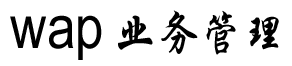
<style>
.page{position:relative;width:292px;height:66px;background:#ffffff}
.page>*{position:absolute;margin:0}
.t1{font:50.7px "STXingkai";color:#000000;scale:0.84 1}
.t2{font:60.8px "ArialMT";color:#000000;scale:0.84 1}
</style>
<div class="page">
<p class="t1" style="left:10px;top:10px;width:269px;height:50px"><span class="t2">wap</span>业务管理</p>
</div>
